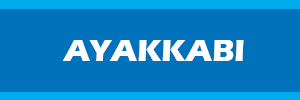
<style>
.page{position:relative;width:300px;height:100px;background:#0072bb}
.page>*{position:absolute;margin:0}
.t1{font:32px "ErasITC-Bold";color:#ffffff}
</style>
<div class="page">
<p class="t1" style="left:62px;top:40px;width:182px;height:21px">AYAKKABI</p>
</div>
